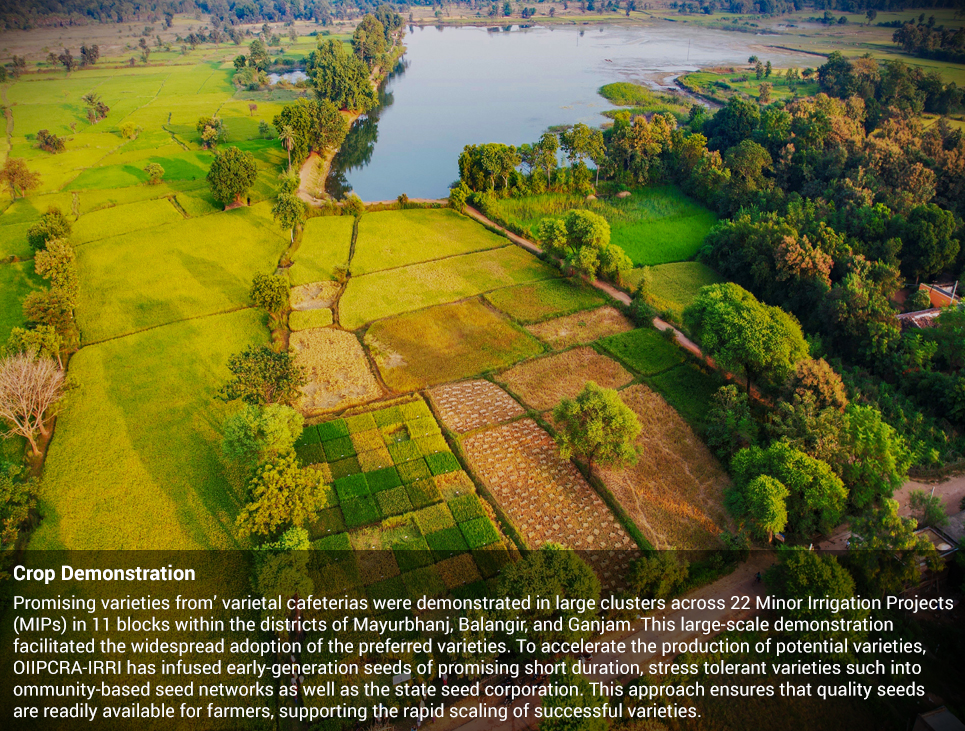
<style>
.page{position:relative;width:965px;height:731px}
.page>*{position:absolute;margin:0}
.t1{font:20px "Roboto-Bold";letter-spacing:0.005em;color:#ffffff}
.t2{font:18px "Roboto-Regular";letter-spacing:0.005em;color:#ffffff}
</style>
<div class="page">
<p class="t1" style="left:14px;top:564px;width:181px;height:20px">Crop Demonstration</p>
<p class="t2" style="left:13px;top:595px;width:940px;height:126px">Promising varieties from’ varietal cafeterias were demonstrated in large clusters across 22 Minor Irrigation Projects<br>(MIPs) in 11 blocks within the districts of Mayurbhanj, Balangir, and Ganjam. This large-scale demonstration<br>facilitated the widespread adoption of the preferred varieties. To accelerate the production of potential varieties,<br>OIIPCRA-IRRI has infused early-generation seeds of promising short duration, stress tolerant varieties such into <br>ommunity-based seed networks as well as the state seed corporation. This approach ensures that quality seeds<br>are readily available for farmers, supporting the rapid scaling of successful varieties.</p>
</div>
